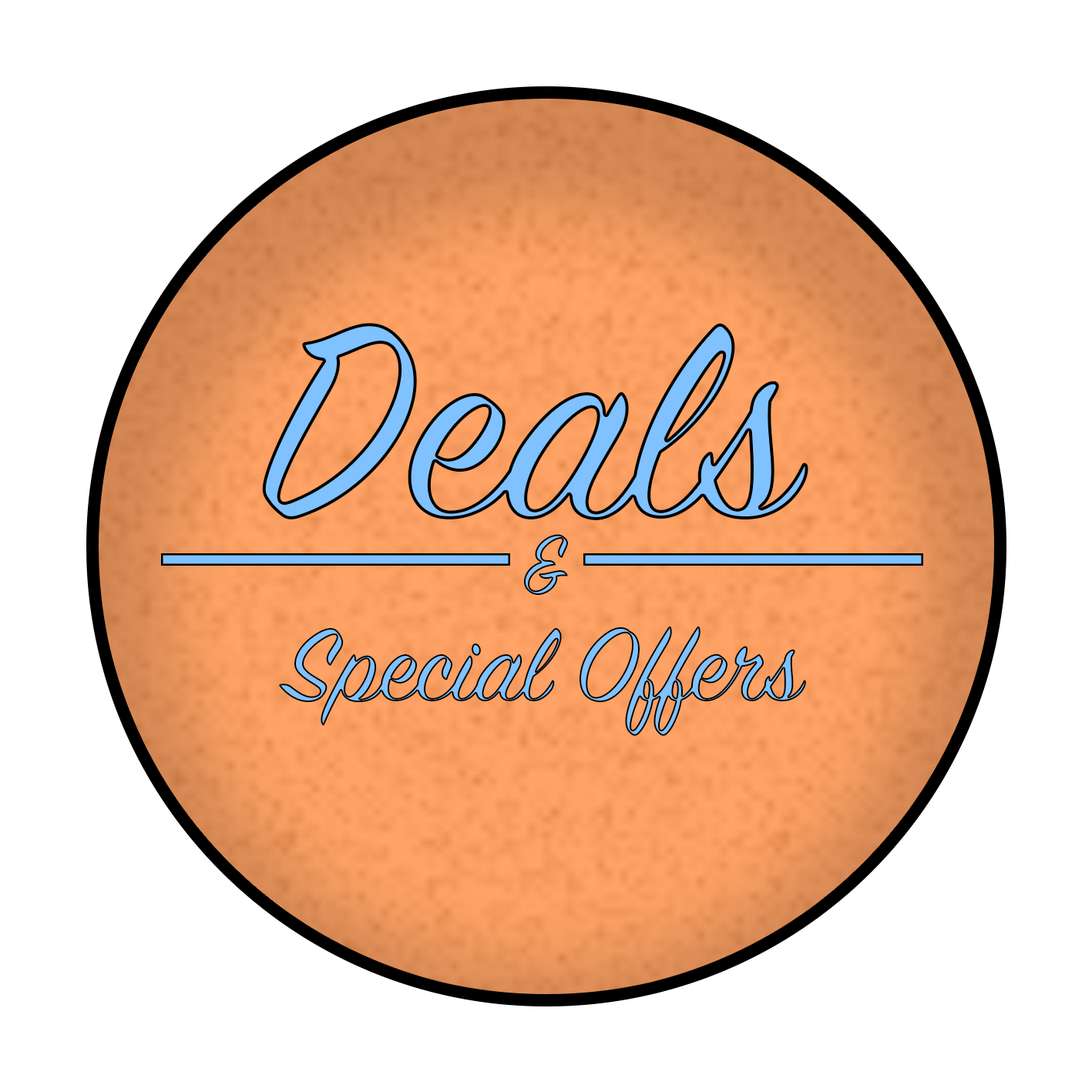
<style>
.page{position:relative;width:1092px;height:1092px;background:#ffffff}
.page>*{position:absolute;margin:0}
.t1{font:308.3px "SignPainter-HouseScript";color:#80c1ff}
.t2{font:92.5px "SignPainter-HouseScript"}
.t3{font:115.6px "SignPainter-HouseScript"}
</style>
<div class="page">
<p class="t1" style="left:262px;top:323px;width:546px;height:197px">Deals</p>
<p class="t2" style="left:523px;top:534px;width:45px;height:61px">&amp;</p>
<p class="t3" style="left:279px;top:626px;width:527px;height:110px">Special Offers</p>
</div>
